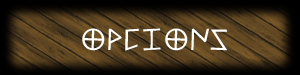
<style>
.page{position:relative;width:300px;height:75px}
.page>*{position:absolute;margin:0}
.t1{font:32px "Alfabetix";color:#ffffff}
</style>
<div class="page">
<p class="t1" style="left:82px;top:28px;width:145px;height:23px">OPCIONS</p>
</div>
